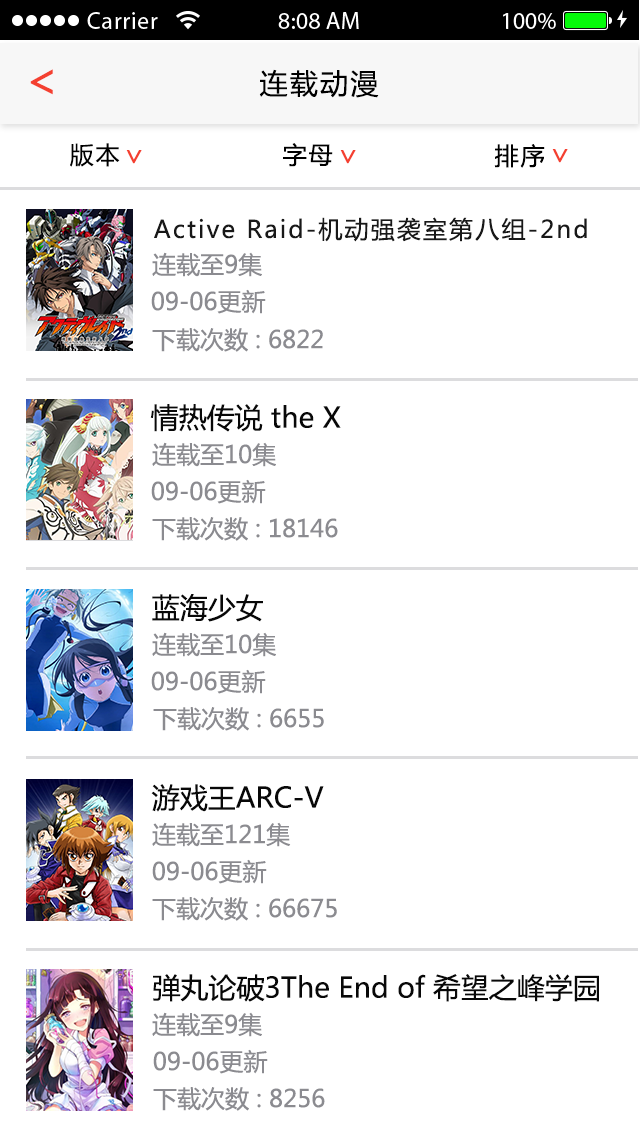
<style>
.page{position:relative;width:640px;height:1136px;background:#ffffff}
.page>*{position:absolute;margin:0}
.t1{font:47.2px "MicrosoftYaHei";letter-spacing:0.08em;color:#f44030}
.t2{font:28px "MicrosoftYaHei";letter-spacing:0.08em;color:#000000}
.t3{font:24px "MicrosoftYaHei";letter-spacing:0.08em;color:#000000}
.t4{font:28.2px "MicrosoftYaHei";letter-spacing:0.08em;color:#f44030}
.t5{font:24px "MicrosoftYaHei";letter-spacing:0.09em;color:#181818}
.t6{font:24px "MicrosoftYaHei";color:#8b8b90}
.t7{font:28px "MicrosoftYaHei";color:#080808}
</style>
<div class="page">
<p class="t1" style="left:30px;top:69px;width:23px;height:26px">&lt;</p>
<p class="t2" style="left:259px;top:69px;width:120px;height:29px">连载动漫</p>
<p class="t3" style="left:70px;top:143px;width:50px;height:24px">版本</p>
<p class="t4" style="left:126px;top:150px;width:16px;height:14px;rotate:90deg">&gt;</p>
<p class="t3" style="left:283px;top:143px;width:50px;height:24px">字母</p>
<p class="t4" style="left:340px;top:150px;width:16px;height:14px;rotate:90deg">&gt;</p>
<p class="t3" style="left:494px;top:144px;width:51px;height:24px">排序</p>
<p class="t4" style="left:552px;top:149px;width:16px;height:14px;rotate:90deg">&gt;</p>
<p class="t5" style="left:154px;top:217px;width:433px;height:25px">Active Raid-机动强袭室第八组-2nd</p>
<p class="t6" style="left:152px;top:252px;width:110px;height:25px">连载至9集</p>
<p class="t6" style="left:151px;top:289px;width:115px;height:25px">09-06更新</p>
<p class="t6" style="left:152px;top:328px;width:171px;height:24px">下载次数 : 6822</p>
<p class="t7" style="left:150px;top:404px;width:191px;height:28px">情热传说 the X</p>
<p class="t6" style="left:152px;top:442px;width:124px;height:25px">连载至10集</p>
<p class="t6" style="left:151px;top:479px;width:115px;height:25px">09-06更新</p>
<p class="t6" style="left:152px;top:517px;width:186px;height:24px">下载次数 : 18146</p>
<p class="t7" style="left:152px;top:594px;width:111px;height:28px">蓝海少女</p>
<p class="t6" style="left:152px;top:632px;width:124px;height:25px">连载至10集</p>
<p class="t6" style="left:151px;top:669px;width:115px;height:25px">09-06更新</p>
<p class="t6" style="left:153px;top:707px;width:171px;height:24px">下载次数 : 6655</p>
<p class="t7" style="left:151px;top:784px;width:173px;height:28px">游戏王ARC-V</p>
<p class="t6" style="left:152px;top:822px;width:139px;height:25px">连载至121集</p>
<p class="t6" style="left:152px;top:859px;width:115px;height:25px">09-06更新</p>
<p class="t6" style="left:152px;top:897px;width:185px;height:24px">下载次数 : 66675</p>
<p class="t7" style="left:153px;top:974px;width:446px;height:28px">弹丸论破3The End of 希望之峰学园</p>
<p class="t6" style="left:152px;top:1012px;width:110px;height:25px">连载至9集</p>
<p class="t6" style="left:153px;top:1049px;width:115px;height:25px">09-06更新</p>
<p class="t6" style="left:153px;top:1087px;width:172px;height:24px">下载次数 : 8256</p>
</div>
